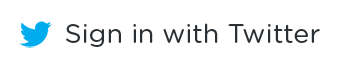
<style>
.page{position:relative;width:357px;height:71px;background:#ffffff}
.page>*{position:absolute;margin:0}
.t1{font:26.6px "GothamRounded-Book";color:#292f33}
</style>
<div class="page">
<p class="t1" style="left:66px;top:23px;width:254px;height:24px">Sign in with Twitter</p>
</div>
